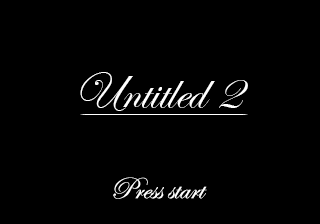
<style>
.page{position:relative;width:320px;height:224px;background:#000000}
.page>*{position:absolute;margin:0}
.t1{font:52px "EdwardianScriptITC";color:#ffffff}
.t2{font:31px "EdwardianScriptITC";color:#ffffff}
</style>
<div class="page">
<p class="t1" style="left:80px;top:72px;width:168px;height:39px">Untitled 2</p>
<p class="t2" style="left:113px;top:177px;width:94px;height:22px">Press start</p>
</div>
